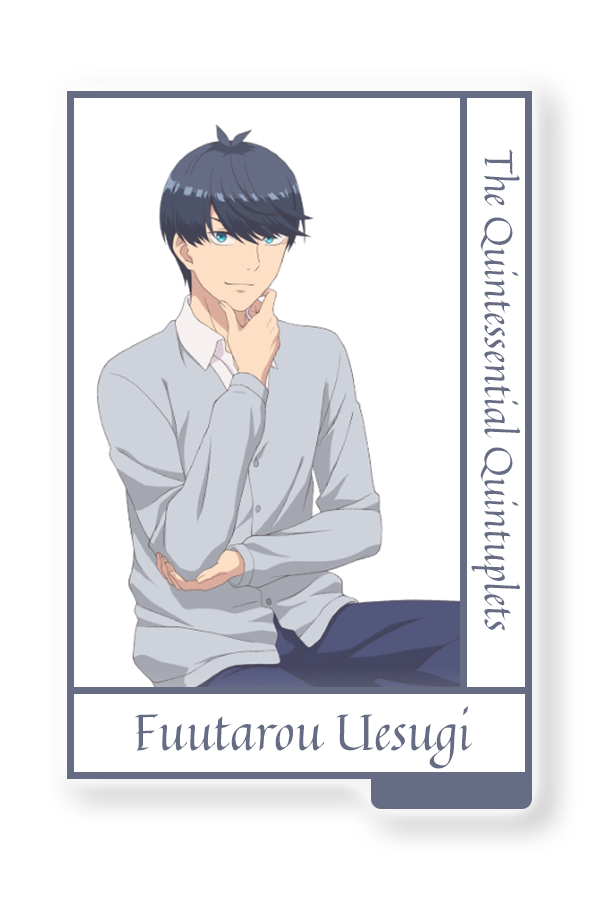
<style>
.page{position:relative;width:600px;height:900px;background:#ffffff}
.page>*{position:absolute;margin:0}
.t1{font:39px "Quintessential-Regular";color:#666c84}
.t2{font:50.5px "Quintessential-Regular";color:#666c84}
</style>
<div class="page">
<p class="t1" style="left:471px;top:149px;width:50px;height:482px;rotate:90deg">The Quintessential Quintuplets</p>
<p class="t2" style="left:134px;top:706px;width:338px;height:63px">Fuutarou Uesugi</p>
</div>
